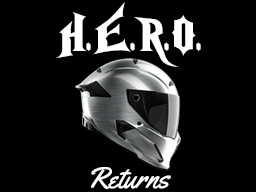
<style>
.page{position:relative;width:256px;height:192px;background:#000000}
.page>*{position:absolute;margin:0}
.t1{font:51.3px "NightmareHero";color:#ffffff}
.t2{font:30px "Yellowtail";color:#ffffff}
</style>
<div class="page">
<p class="t1" style="left:56px;top:2px;width:145px;height:65px">H.E.R.O.</p>
<p class="t2" style="left:91px;top:167px;width:80px;height:23px">Returns</p>
</div>
